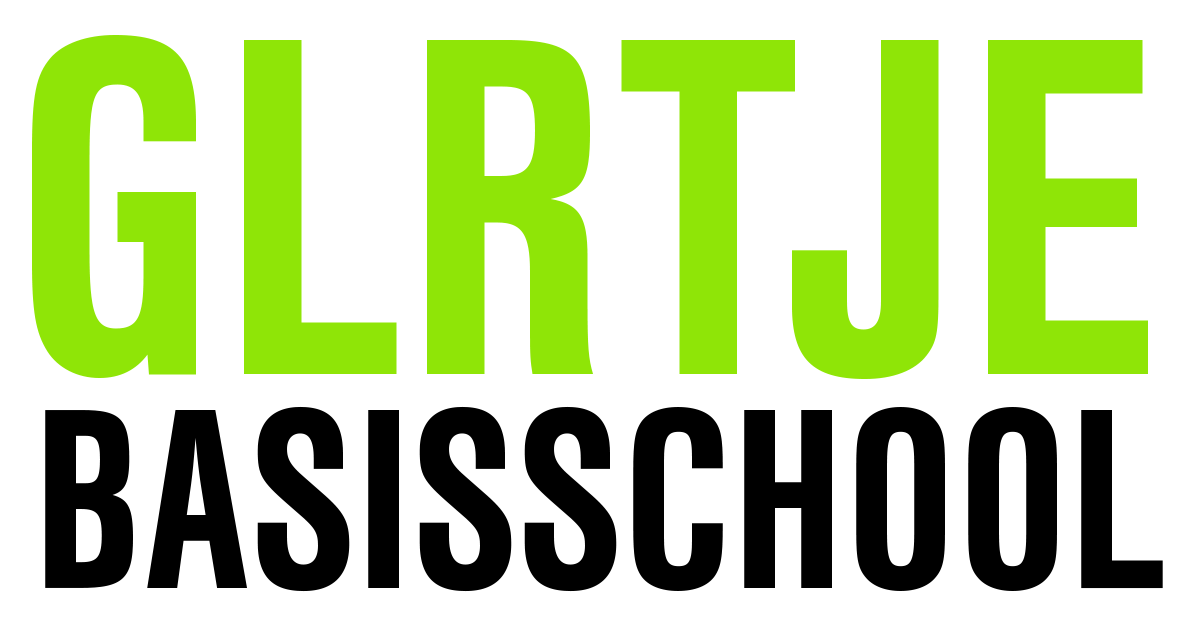
<style>
.page{position:relative;width:1181px;height:623px;background:#ffffff}
.page>*{position:absolute;margin:0}
.t1{font:500px "NimbusSansT-BoldCondensed";color:#8fe507}
.t2{font:266.7px "NimbusSansT-BoldCondensed";color:#000000}
</style>
<div class="page">
<p class="t1" style="left:32px;top:35px;width:1116px;height:344px">GLRTJE</p>
<p class="t2" style="left:45px;top:406px;width:1118px;height:186px">BASISSCHOOL</p>
</div>
